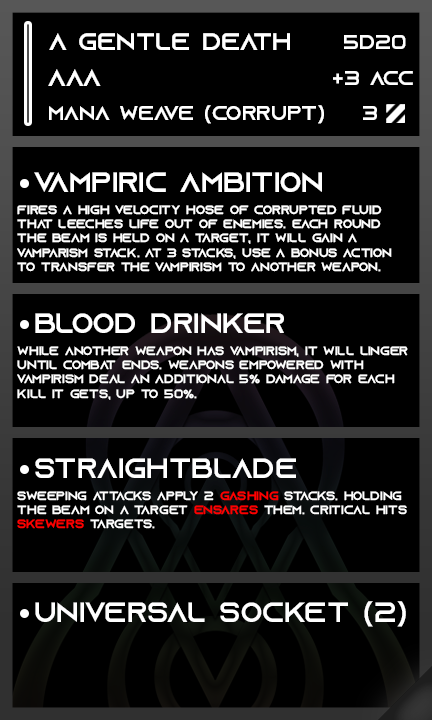
<style>
.page{position:relative;width:432px;height:720px;background:#000000}
.page>*{position:absolute;margin:0}
.t1{font:24px "AzonixRegular";color:#ffffff}
.t2{font:20px "AzonixRegular";color:#ffffff}
.t3{font:28px "AzonixRegular";color:#ffffff}
.t4{font:12px "AzonixRegular";color:#ffffff}
.t5{font:12px "AzonixRegular";color:#ff0000}
</style>
<div class="page">
<p class="t1" style="left:49px;top:33px;width:241px;height:17px">a gentle death</p>
<p class="t2" style="left:344px;top:35px;width:62px;height:14px">5d20</p>
<p class="t1" style="left:48px;top:69px;width:53px;height:17px">aaa</p>
<p class="t2" style="left:333px;top:71px;width:80px;height:14px">+3 acc</p>
<p class="t2" style="left:49px;top:105px;width:275px;height:19px">mana weave (corrupt)</p>
<p class="t2" style="left:363px;top:106px;width:14px;height:14px">3</p>
<p class="t3" style="left:34px;top:172px;width:288px;height:20px">vampiric ambition</p>
<p class="t4" style="left:17px;top:205px;width:375px;height:67px">fires a high velocity hose of corrupted fluid<br>that leeches life out of enemies. each round<br>the beam is held on a target, it will gain a <br>vamparism stack. at 3 stacks, use a bonus action<br>to transfer the vampirism to another weapon.</p>
<p class="t3" style="left:35px;top:313px;width:249px;height:20px">blood drinker</p>
<p class="t4" style="left:17px;top:346px;width:391px;height:54px">while another weapon has vampirism, it will linger<br>until combat ends. weapons empowered with <br>vampirism deal an additional 5% damage for each <br>kill it gets, up to 50%.</p>
<p class="t3" style="left:35px;top:458px;width:261px;height:20px">straightblade</p>
<p class="t4" style="left:17px;top:491px;width:390px;height:38px">sweeping attacks apply 2 <span class="t5">gashing</span> stacks. holding <br>the beam on a target <span class="t5">ensares</span> them. critical hits<br><span class="t5">skewers</span> targets.</p>
<p class="t3" style="left:35px;top:601px;width:371px;height:26px">universal socket (2)</p>
</div>
